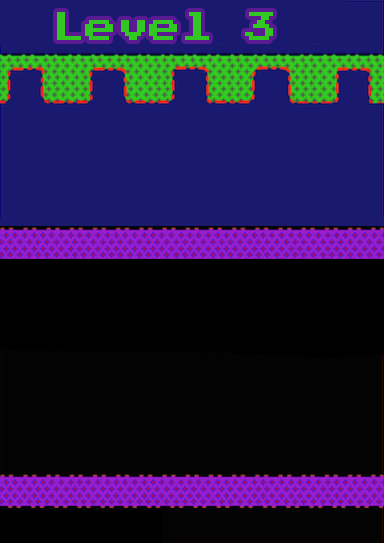
<style>
.page{position:relative;width:384px;height:543px;background:#191970}
.page>*{position:absolute;margin:0}
.t1{font:32px "PressStart2P-Regular";color:#32c722}
</style>
<div class="page">
<p class="t1" style="left:57px;top:12px;width:216px;height:28px">Level 3</p>
</div>
